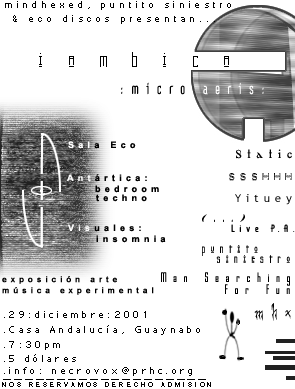
<style>
.page{position:relative;width:295px;height:389px;background:#ffffff}
.page>*{position:absolute;margin:0}
.t1{font:9px "MicrosoftSansSerif";letter-spacing:0.475em;color:#000000}
.t2{font:21px "Kashmir";letter-spacing:0.475em;color:#000000}
.t3{font:9px "Arial-BoldMT";letter-spacing:0.475em;color:#000000}
.t4{font:9px "Arial-BoldMT";letter-spacing:0.475em;color:#ffffff}
.t5{font:12px "Eccentric";letter-spacing:0.475em;color:#000000}
.t6{font:9px "Arial-BoldMT";letter-spacing:0.475em;color:#fafafa}
.t7{font:8px "Plastique";letter-spacing:0.475em;color:#000000}
.t8{font:11px "TrebuchetMS";letter-spacing:0.475em}
.t9{font:14px "EnyaPlain";letter-spacing:0.475em;color:#000000}
.t10{font:9px "Arial-BoldMT";letter-spacing:0.475em;color:#fcfcfc}
.t11{font:10px "DraftGothicThin";letter-spacing:0.475em;color:#000000}
.t12{font:12px "Kashmir";letter-spacing:0.475em;color:#000000}
.t13{font:8px "Arial-BoldMT";letter-spacing:0.475em;color:#000000;font-weight:bold}
.t14{font:12px "GothamNightsNormal";letter-spacing:0.475em;color:#000000}
.t15{font:18px "Creepygirl";letter-spacing:0.475em;color:#000000}
.t16{font:7px "ADMUI3Sm";letter-spacing:0.475em;color:#000000;font-weight:bold}
.t17{font:6px "ArialMT";letter-spacing:0.475em;color:#000000;font-weight:bold}
.t18{font:6px "Fixedsys";letter-spacing:0.475em;color:#000000;font-weight:bold}
</style>
<div class="page">
<p class="t1" style="left:5px;top:1px;width:226px;height:9px">mindhexed, puntito siniestro</p>
<p class="t1" style="left:13px;top:15px;width:202px;height:9px">&amp; eco discos presentan...</p>
<p class="t2" style="left:39px;top:52px;width:190px;height:15px">i a m b i c a</p>
<p class="t3" style="left:68px;top:141px;width:68px;height:8px"><span class="t4">Sal</span>a Eco</p>
<p class="t5" style="left:236px;top:149px;width:56px;height:10px">Static</p>
<p class="t3" style="left:67px;top:174px;width:80px;height:8px"><span class="t6">An</span><span class="t4">t</span>ártica:</p>
<p class="t7" style="left:229px;top:173px;width:63px;height:8px">SSSHHH</p>
<p class="t3" style="left:95px;top:185px;width:64px;height:8px">bedroom</p>
<p class="t3" style="left:96px;top:194px;width:51px;height:8px">techno</p>
<p class="t8" style="left:235px;top:194px;width:57px;height:11px">Yituey</p>
<p class="t9" style="left:202px;top:214px;width:43px;height:8px">(...)</p>
<p class="t3" style="left:68px;top:224px;width:73px;height:8px"><span class="t10">Vis</span>uales:</p>
<p class="t11" style="left:231px;top:224px;width:64px;height:8px">Live P.A.</p>
<p class="t3" style="left:96px;top:235px;width:70px;height:8px">insomnia</p>
<p class="t12" style="left:202px;top:245px;width:56px;height:11px">puntito</p>
<p class="t12" style="left:216px;top:255px;width:74px;height:8px">siniestro</p>
<p class="t13" style="left:2px;top:276px;width:115px;height:8px">exposición arte</p>
<p class="t14" style="left:161px;top:272px;width:129px;height:14px">Man Searching</p>
<p class="t13" style="left:2px;top:287px;width:152px;height:8px">música experimental</p>
<p class="t14" style="left:225px;top:284px;width:65px;height:10px">For Fun</p>
<p class="t15" style="left:254px;top:303px;width:37px;height:18px">mhx</p>
<p class="t16" style="left:4px;top:311px;width:142px;height:7px">.29:diciembre:2001</p>
<p class="t16" style="left:4px;top:325px;width:196px;height:10px">.Casa Andalucía, Guaynabo</p>
<p class="t16" style="left:4px;top:341px;width:56px;height:9px">.7:30pm</p>
<p class="t16" style="left:4px;top:354px;width:72px;height:8px">.5 dólares</p>
<p class="t16" style="left:4px;top:367px;width:188px;height:9px">.info: necrovox@prhc.org</p>
<p class="t17" style="left:2px;top:382px;width:209px;height:5px">NOS RESERVAMOS DERECHO ADMISION</p>
<p class="t18" style="left:3px;top:379px;width:203px;height:1px">___________________</p>
</div>
